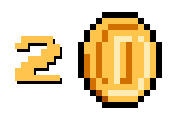
<style>
.page{position:relative;width:174px;height:120px;background:#ffffff}
.page>*{position:absolute;margin:0}
.t1{font:90px "ArcadeClassic";letter-spacing:-0.05em;color:#ffc44d}
</style>
<div class="page">
<p class="t1" style="left:15px;top:36px;width:45px;height:45px">2</p>
</div>
